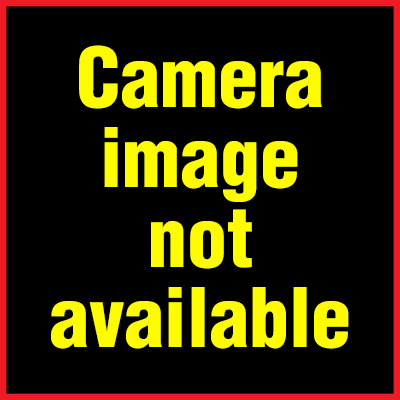
<style>
.page{position:relative;width:400px;height:400px;background:#000000}
.page>*{position:absolute;margin:0}
.t1{font:80px/80px "Helvetica-CondensedBlack";color:#fffc00}
</style>
<div class="page">
<p class="t1" style="left:51px;top:45px;width:298px;height:304px;text-align:center">Camera image    not     available</p>
</div>
